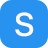
<style>
.page{position:relative;width:48px;height:48px;background:#2892f1}
.page>*{position:absolute;margin:0}
.t1{font:33px "SFProDisplay-Medium";color:#fff9fb}
</style>
<div class="page">
<p class="t1" style="left:15px;top:12px;width:19px;height:25px">S</p>
</div>
